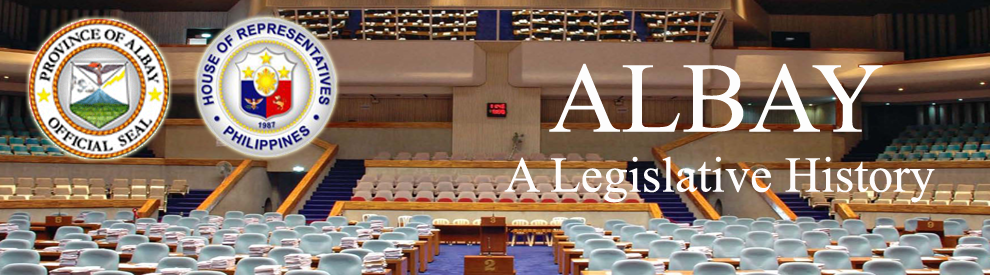
<style>
.page{position:relative;width:990px;height:275px}
.page>*{position:absolute;margin:0}
.t1{font:50px "TimesNewRomanPSMT";color:#fdfcfc}
.t2{font:100px "TimesNewRomanPSMT";color:#fdfdfd}
</style>
<div class="page">
<p class="t1" style="left:504px;top:63px;width:431px;height:140px;text-align:center"><span class="t2">ALBAY<br></span>A Legislative History</p>
</div>
